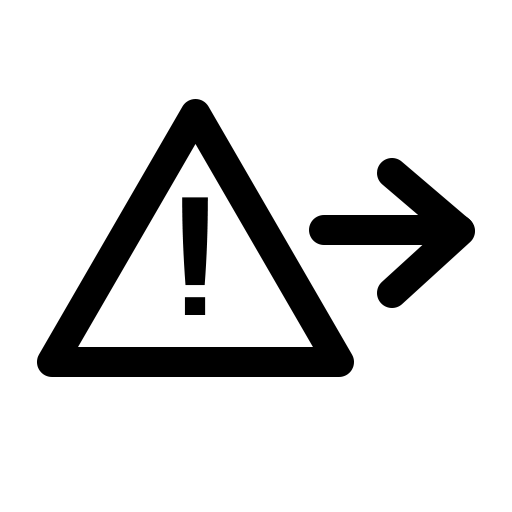
<style>
.page{position:relative;width:512px;height:512px;background:#ffffff}
.page>*{position:absolute;margin:0}
.t1{font:144px "OtomanopeeOne-Regular";color:#000000}
</style>
<div class="page">
<p class="t1" style="left:182px;top:197px;width:26px;height:118px">!</p>
</div>
